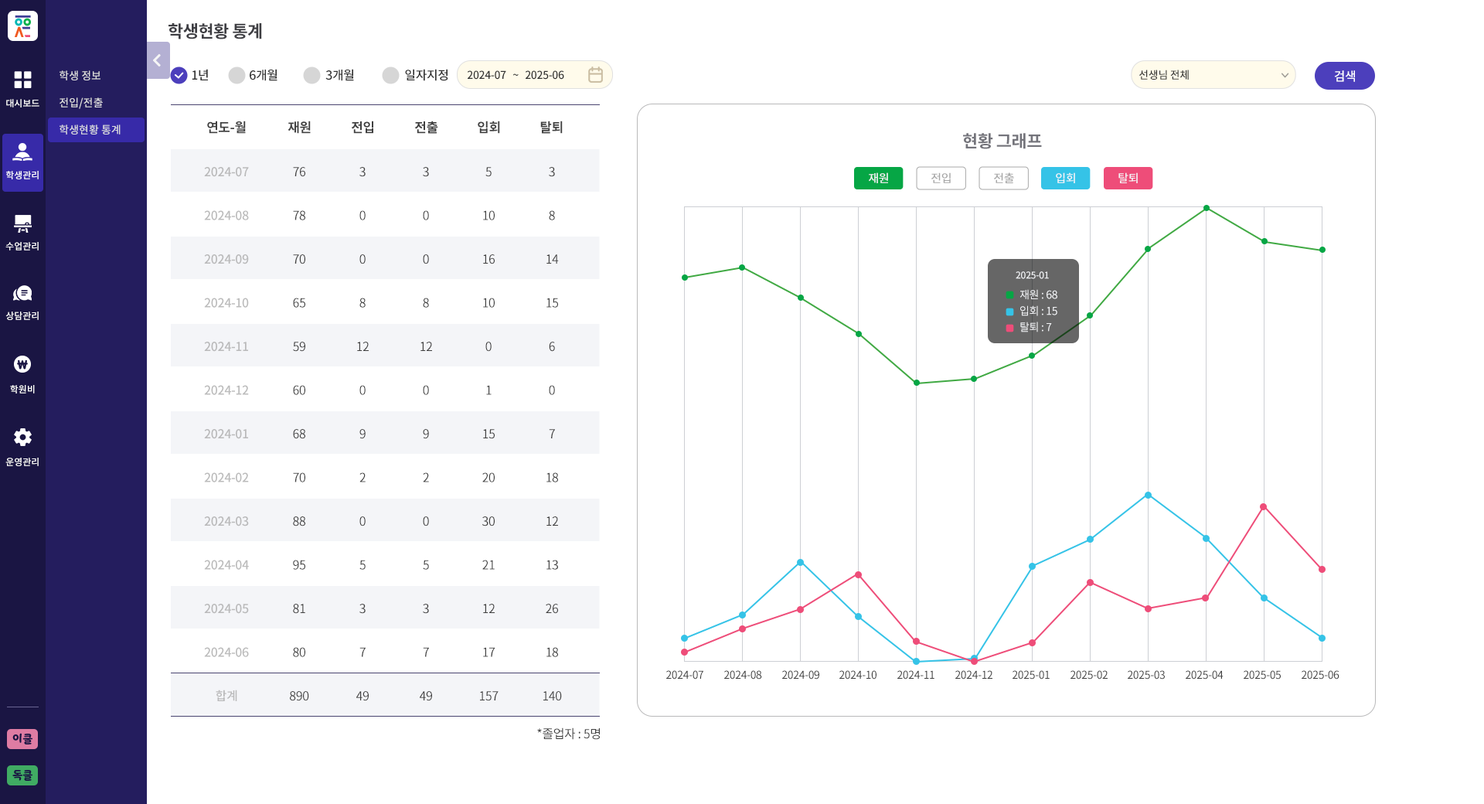
<style>
.page{position:relative;width:1484px;height:804px;background:#ffffff}
.page>*{position:absolute;margin:0}
.t1{font:17px "NotoSansCJKkr-Bold";letter-spacing:-0.025em;color:#3e3e43;text-transform:uppercase}
.t2{font:10.8px/27px "NotoSansCJKkr-Medium";color:#e1e1e1}
.t3{font:12.4px "NotoSansCJKkr-Medium";letter-spacing:-0.025em;color:#323232}
.t4{font:10.8px "NotoSansCJKkr-Medium";letter-spacing:-0.025em;color:#323232}
.t5{font:12.4px "NotoSansCJKkr-Medium";letter-spacing:-0.025em;color:#ffffff}
.t6{font:9.3px "NotoSansCJKkr-Medium";color:#ffffff}
.t7{font:13.1px "NotoSansCJKkr-Bold";letter-spacing:-0.025em;color:#404040}
.t8{font:17px "NotoSansCJKkr-Bold";letter-spacing:-0.025em;color:#74747b;text-transform:uppercase}
.t9{font:12.4px/43.7px "NotoSansCJKkr-Medium";letter-spacing:-0.025em;color:#a8a8a8}
.t10{font:12.4px/43.7px "NotoSansCJKkr-Regular";letter-spacing:-0.025em;color:#404040}
.t11{font:11.6px "NotoSansCJKkr-Medium";letter-spacing:-0.025em;color:#f4f5f8}
.t12{font:11.6px "NotoSansCJKkr-Medium";letter-spacing:-0.025em;color:#a7a7a7}
.t13{font:9.3px "NotoSansCJKkr-Medium";letter-spacing:-0.025em;color:#f4f5f8}
.t14{font:10.8px/16.2px "NotoSansCJKkr-Regular";letter-spacing:-0.025em;color:#f4f5f8}
.t15{font:10.8px "NotoSansCJKkr-Regular";letter-spacing:-0.025em;color:#404040}
.t16{font:10.8px "YoonSoftSlime";color:#1a1543}
.t17{font:12.4px "NotoSansCJKkr-Regular";letter-spacing:-0.025em;color:#404040}
</style>
<div class="page">
<p class="t1" style="left:168px;top:23px;width:94px;height:16px">학생현황 통계</p>
<p class="t2" style="left:60px;top:70px;width:61px;height:64px">학생 정보<br>전입/전출<br>학생현황 통계</p>
<p class="t3" style="left:192px;top:69px;width:16px;height:11px">1년</p>
<p class="t3" style="left:250px;top:69px;width:27px;height:12px">6개월</p>
<p class="t3" style="left:325px;top:69px;width:29px;height:12px">3개월</p>
<p class="t3" style="left:405px;top:69px;width:43px;height:12px">일자지정</p>
<p class="t4" style="left:467px;top:70px;width:97px;height:10px">2024-07   ~   2025-06</p>
<p class="t4" style="left:1139px;top:70px;width:50px;height:10px">선생님 전체</p>
<p class="t5" style="left:1334px;top:70px;width:21px;height:12px">검색</p>
<p class="t6" style="left:6px;top:99px;width:33px;height:8px">대시보드</p>
<p class="t7" style="left:207px;top:121px;width:39px;height:13px">연도-월</p>
<p class="t7" style="left:287px;top:121px;width:24px;height:13px">재원</p>
<p class="t7" style="left:351px;top:121px;width:22px;height:13px">전입</p>
<p class="t7" style="left:414px;top:121px;width:24px;height:13px">전출</p>
<p class="t7" style="left:478px;top:121px;width:22px;height:13px">입회</p>
<p class="t7" style="left:540px;top:121px;width:23px;height:13px">탈퇴</p>
<p class="t8" style="left:963px;top:133px;width:79px;height:16px">현황 그래프</p>
<p class="t6" style="left:6px;top:171px;width:33px;height:8px">학생관리</p>
<p class="t9" style="left:204px;top:167px;width:45px;height:534px;text-align:center;opacity:0.8">2024-07<br>2024-08<br>2024-09<br>2024-10<br>2024-11<br>2024-12<br>2024-01<br>2024-02<br>2024-03<br>2024-04<br>2024-05<br>2024-06<br>합계</p>
<p class="t10" style="left:290px;top:167px;width:19px;height:534px;text-align:center">76<br>78<br>70<br>65<br>59<br>60<br>68<br>70<br>88<br>95<br>81<br>80<br>890</p>
<p class="t10" style="left:356px;top:167px;width:13px;height:534px;text-align:center">3<br>0<br>0<br>8<br>12<br>0<br>9<br>2<br>0<br>5<br>3<br>7<br>49</p>
<p class="t10" style="left:420px;top:167px;width:12px;height:534px;text-align:center">3<br>0<br>0<br>8<br>12<br>0<br>9<br>2<br>0<br>5<br>3<br>7<br>49</p>
<p class="t10" style="left:480px;top:167px;width:18px;height:534px;text-align:center">5<br>10<br>16<br>10<br>0<br>1<br>15<br>20<br>30<br>21<br>12<br>17<br>157</p>
<p class="t10" style="left:543px;top:167px;width:19px;height:534px;text-align:center">3<br>8<br>14<br>15<br>6<br>0<br>7<br>18<br>12<br>13<br>26<br>18<br>140</p>
<p class="t11" style="left:869px;top:172px;width:19px;height:11px">재원</p>
<p class="t12" style="left:931px;top:172px;width:20px;height:11px">전입</p>
<p class="t12" style="left:994px;top:172px;width:20px;height:11px">전출</p>
<p class="t11" style="left:1056px;top:172px;width:19px;height:11px">입회</p>
<p class="t11" style="left:1118px;top:172px;width:20px;height:11px">탈퇴</p>
<p class="t6" style="left:5px;top:242px;width:34px;height:8px">수업관리</p>
<p class="t13" style="left:1015px;top:271px;width:34px;height:8px">2025-01</p>
<p class="t14" style="left:1019px;top:289px;width:38px;height:43px">재원 : 68<br>입회 : 15<br>탈퇴 : 7</p>
<p class="t6" style="left:5px;top:311px;width:34px;height:9px">상담관리</p>
<p class="t6" style="left:10px;top:385px;width:25px;height:8px">학원비</p>
<p class="t6" style="left:5px;top:457px;width:34px;height:9px">운영관리</p>
<p class="t15" style="left:666px;top:670px;width:37px;height:9px">2024-07</p>
<p class="t15" style="left:724px;top:670px;width:38px;height:9px">2024-08</p>
<p class="t15" style="left:782px;top:670px;width:37px;height:9px">2024-09</p>
<p class="t15" style="left:839px;top:670px;width:37px;height:9px">2024-10</p>
<p class="t15" style="left:897px;top:670px;width:37px;height:9px">2024-11</p>
<p class="t15" style="left:955px;top:670px;width:37px;height:9px">2024-12</p>
<p class="t15" style="left:1012px;top:670px;width:37px;height:9px">2025-01</p>
<p class="t15" style="left:1070px;top:670px;width:37px;height:9px">2025-02</p>
<p class="t15" style="left:1127px;top:670px;width:38px;height:9px">2025-03</p>
<p class="t15" style="left:1185px;top:670px;width:38px;height:9px">2025-04</p>
<p class="t15" style="left:1243px;top:670px;width:37px;height:9px">2025-05</p>
<p class="t15" style="left:1301px;top:670px;width:38px;height:9px">2025-06</p>
<p class="t16" style="left:12px;top:733px;width:20px;height:11px">이클</p>
<p class="t17" style="left:537px;top:727px;width:63px;height:13px">*졸업자 : 5명</p>
<p class="t16" style="left:12px;top:770px;width:20px;height:10px">독클</p>
</div>
